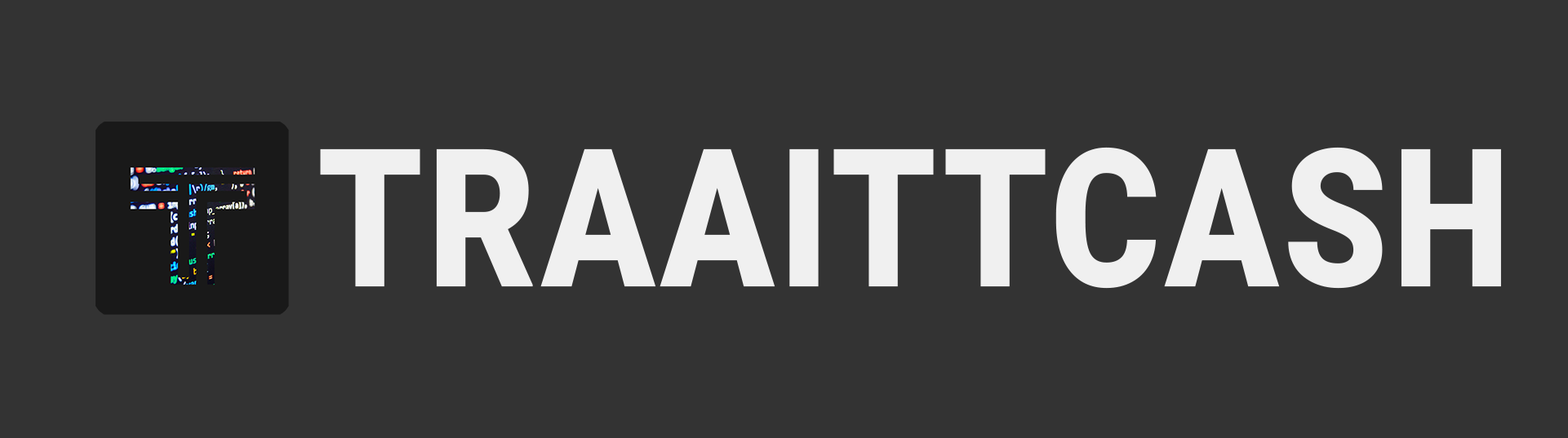
<style>
.page{position:relative;width:1568px;height:438px;background:#333333}
.page>*{position:absolute;margin:0}
.t1{font:192.3px "Roboto-Black";color:#f0f0f0;font-weight:bold;scale:0.87 1}
</style>
<div class="page">
<p class="t1" style="left:320px;top:147px;width:1181px;height:142px">TRAAITTCASH</p>
</div>
